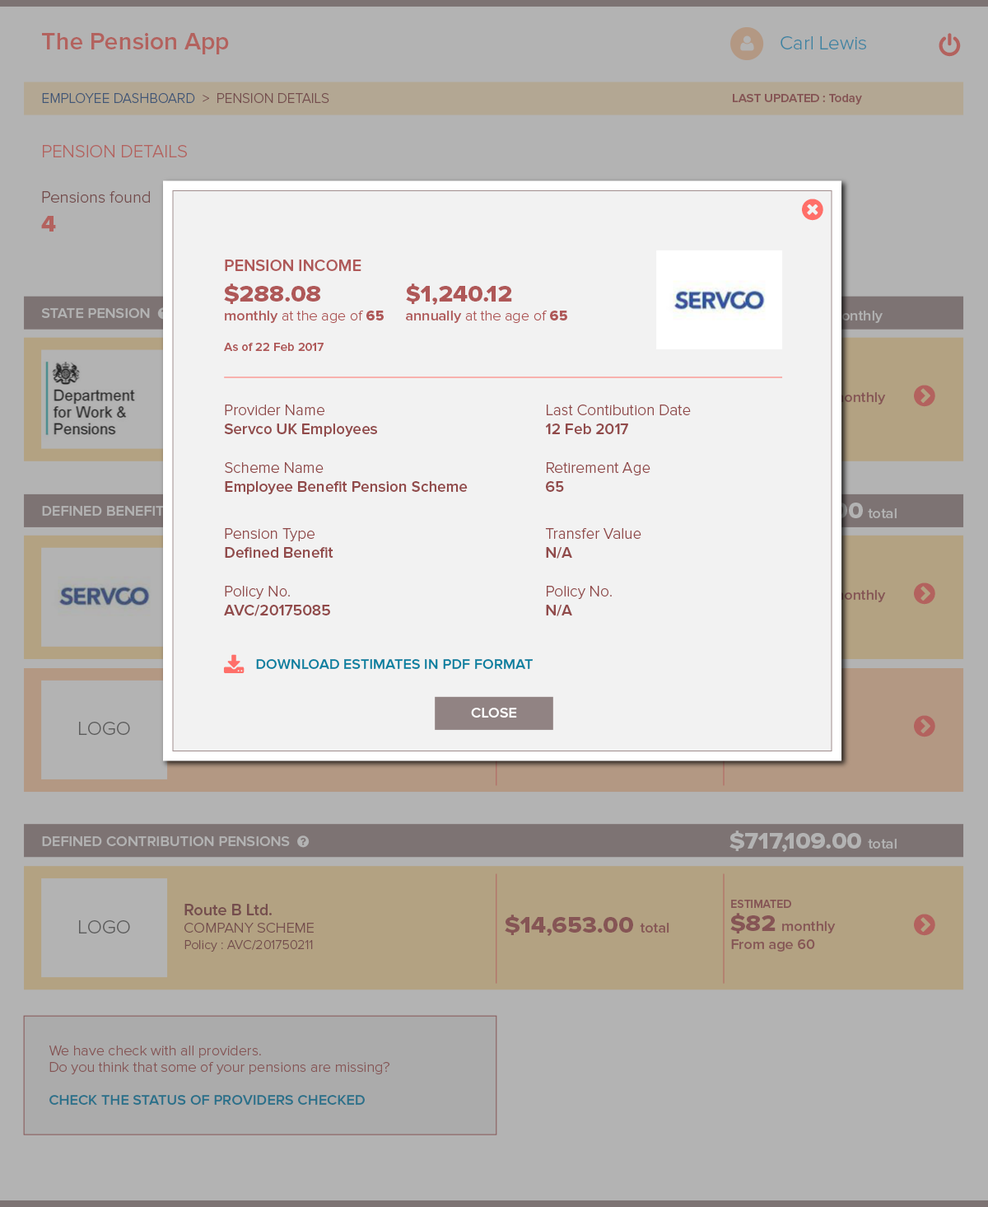
<style>
.page{position:relative;width:988px;height:1207px;background:#b3b3b3}
.page>*{position:absolute;margin:0}
.t1{font:24.7px "ProximaNova-Semibold";color:#b3625e}
.t2{font:19.8px "ProximaNova-Light";color:#3b83a2}
.t3{font:14px "ProximaNova-Light"}
.t4{font:12.4px "ProximaNova-Semibold";color:#865555}
.t5{font:18.1px "ProximaNova-Light";color:#b3625e}
.t6{font:16.5px "ProximaNova-Light";color:#754d4d}
.t7{font:23.1px "ProximaNova-Extrabld";color:#b3625e;scale:1.06 1}
.t8{font:16.5px "ProximaNova-Semibold";color:#af5858}
.t9{font:23.1px "ProximaNova-Extrabld";color:#af5858;scale:1.06 1}
.t10{font:14.8px "ProximaNova-Semibold";color:#b3b3b3}
.t11{font:14.8px "ProximaNova-Light";color:#af5858}
.t12{font:14.8px "ProximaNova-Semibold";color:#af5858}
.t13{font:14.8px "ProximaNova-Extrabld";color:#af5858}
.t14{font:12.4px "ProximaNova-Semibold";color:#af5858}
.t15{font:14.8px "ProximaNova-Semibold";color:#865555}
.t16{font:15.6px "ProximaNova-Semibold";color:#914a4a}
.t17{font:15.6px "ProximaNova-Light";color:#914a4a}
.t18{font:14.8px "ProximaNova-Semibold";color:#0880a0}
.t19{font:14.8px "ProximaNova-Semibold";color:#ffffff}
.t20{font:19.7px "ProximaNova-Light";color:#666666}
.t21{font:23.1px "ProximaNova-Extrabld";color:#b3b3b3;scale:1.06 1}
.t22{font:13.2px/16.5px "ProximaNova-Light";color:#754d4d}
.t23{font:16.5px "ProximaNova-Semibold";color:#754d4d}
.t24{font:14.8px "ProximaNova-Light";color:#754d4d}
.t25{font:11.5px "ProximaNova-Semibold";color:#865555}
.t26{font:23.1px "ProximaNova-Extrabld";color:#865555;scale:1.06 1}
.t27{font:14.8px/16.5px "ProximaNova-Light"}
.t28{font:14.8px/16.5px "ProximaNova-Semibold"}
</style>
<div class="page">
<p class="t1" style="left:42px;top:33px;width:187px;height:21px">The Pension App</p>
<p class="t2" style="left:781px;top:36px;width:85px;height:13px">Carl Lewis</p>
<p class="t3" style="left:42px;top:93px;width:287px;height:10px">EMPLOYEE DASHBOARD  &gt;  PENSION DETAILS</p>
<p class="t4" style="left:733px;top:94px;width:129px;height:11px">LAST UPDATED : Today</p>
<p class="t5" style="left:43px;top:145px;width:144px;height:12px">PENSION DETAILS</p>
<p class="t6" style="left:42px;top:191px;width:108px;height:12px">Pensions found</p>
<p class="t7" style="left:41px;top:216px;width:15px;height:15px">4</p>
<p class="t8" style="left:225px;top:259px;width:137px;height:12px">PENSION INCOME</p>
<p class="t9" style="left:224px;top:283px;width:96px;height:21px">$288.08</p>
<p class="t9" style="left:406px;top:283px;width:106px;height:22px">$1,240.12</p>
<p class="t10" style="left:41px;top:308px;width:109px;height:10px">STATE PENSION</p>
<p class="t11" style="left:225px;top:310px;width:159px;height:13px"><span class="t12">monthly</span> at the age of <span class="t13">65</span></p>
<p class="t11" style="left:406px;top:310px;width:161px;height:13px"><span class="t12">annually </span>at the age of <span class="t13">65</span></p>
<p class="t14" style="left:224px;top:343px;width:100px;height:8px">As of 22 Feb 2017</p>
<p class="t15" style="left:833px;top:392px;width:53px;height:12px">monthly</p>
<p class="t16" style="left:224px;top:404px;width:153px;height:32px"><span class="t17">Provider Name<br></span>Servco UK Employees</p>
<p class="t17" style="left:545px;top:404px;width:146px;height:30px">Last Contibution Date<br><span class="t16">12 Feb 2017</span></p>
<p class="t16" style="left:225px;top:462px;width:243px;height:32px"><span class="t17">Scheme Name<br></span>Employee Benefit Pension Scheme</p>
<p class="t17" style="left:546px;top:462px;width:105px;height:30px">Retirement Age<br><span class="t16">65</span></p>
<p class="t10" style="left:868px;top:508px;width:29px;height:10px">total</p>
<p class="t16" style="left:225px;top:528px;width:109px;height:30px"><span class="t17">Pension Type<br></span>Defined Benefit</p>
<p class="t17" style="left:545px;top:528px;width:97px;height:30px">Transfer Value<br><span class="t16">N/A</span></p>
<p class="t16" style="left:224px;top:586px;width:106px;height:30px"><span class="t17">Policy No.<br></span>AVC/20175085</p>
<p class="t17" style="left:546px;top:586px;width:66px;height:30px">Policy No.<br><span class="t16">N/A</span></p>
<p class="t15" style="left:833px;top:590px;width:53px;height:12px">monthly</p>
<p class="t18" style="left:256px;top:659px;width:277px;height:10px">DOWNLOAD ESTIMATES IN PDF FORMAT</p>
<p class="t19" style="left:471px;top:707px;width:46px;height:10px">CLOSE</p>
<p class="t20" style="left:79px;top:721px;width:51px;height:14px">LOGO</p>
<p class="t21" style="left:730px;top:830px;width:131px;height:22px">$717,109.00</p>
<p class="t10" style="left:42px;top:836px;width:248px;height:10px">DEFINED CONTRIBUTION PENSIONS</p>
<p class="t10" style="left:868px;top:838px;width:29px;height:10px">total</p>
<p class="t22" style="left:184px;top:903px;width:130px;height:48px"><span class="t23">Route B Ltd.<br></span><span class="t24">COMPANY SCHEME<br></span>Policy : AVC/201750211</p>
<p class="t25" style="left:731px;top:899px;width:60px;height:9px">ESTIMATED</p>
<p class="t26" style="left:505px;top:914px;width:128px;height:22px">$14,653.00</p>
<p class="t26" style="left:731px;top:913px;width:45px;height:20px">$82</p>
<p class="t20" style="left:79px;top:920px;width:51px;height:13px">LOGO</p>
<p class="t15" style="left:640px;top:922px;width:30px;height:10px">total</p>
<p class="t15" style="left:782px;top:921px;width:54px;height:12px">monthly</p>
<p class="t15" style="left:731px;top:939px;width:84px;height:12px">From age 60</p>
<p class="t27" style="left:49px;top:1045px;width:341px;height:59px">We have check with all providers.<br>Do you think that some of your pensions are missing?<br><br><span class="t28">CHECK THE STATUS OF PROVIDERS CHECKED</span></p>
</div>
